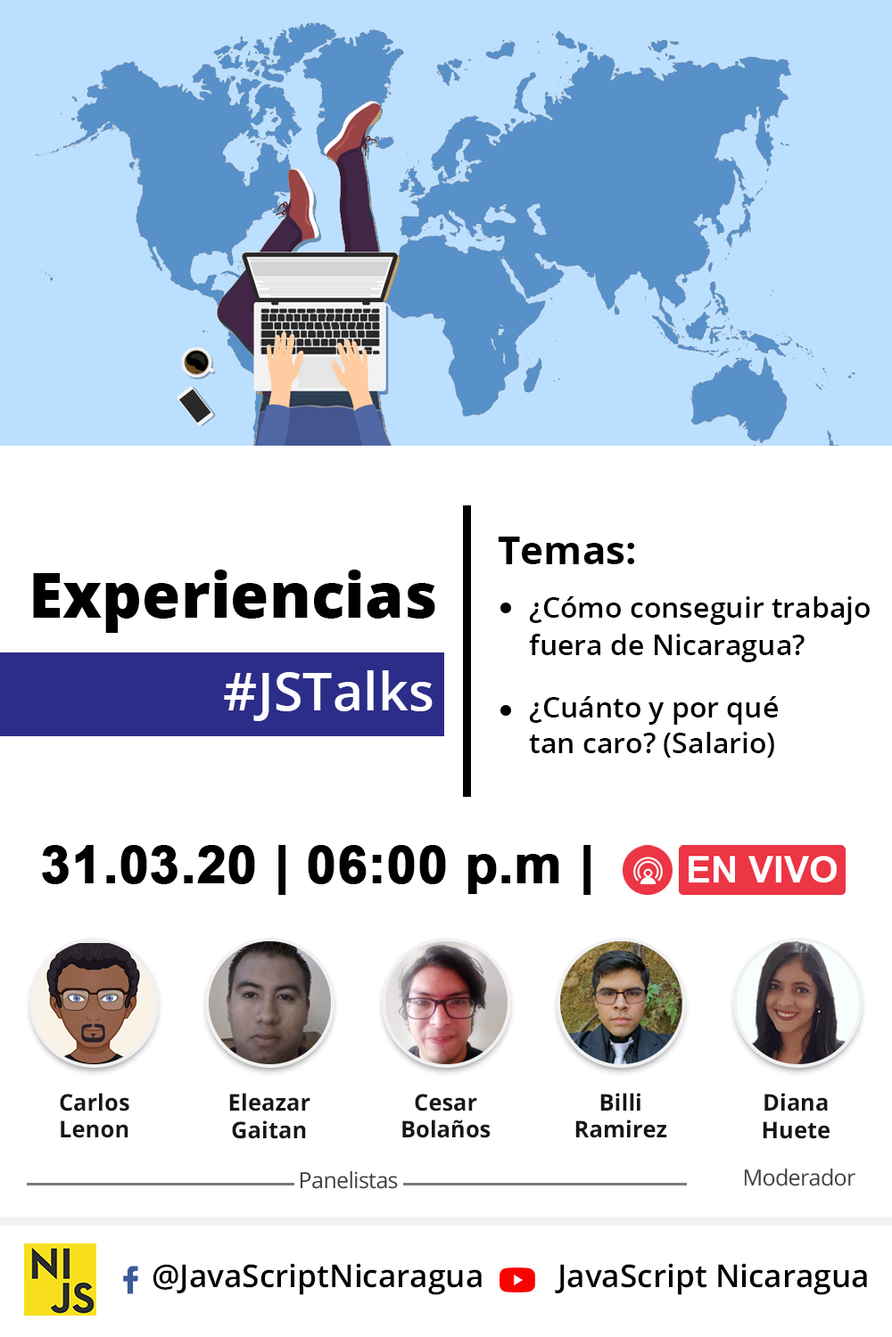
<style>
.page{position:relative;width:892px;height:1337px;background:#ffffff}
.page>*{position:absolute;margin:0}
.t1{font:39.2px "OpenSans-Bold";color:#000000}
.t2{font:62.4px "OpenSans-ExtraBold";color:#000000}
.t3{font:28.5px/37.4px "OpenSans-SemiBold";color:#000000}
.t4{font:28.5px/42.8px "OpenSans-SemiBold";color:#000000}
.t5{font:53px "OpenSans-SemiBold";color:#ffffff}
.t6{font:52.4px "Arial-BoldMT";color:#000000;font-weight:bold}
.t7{font:22.9px "OpenSans-Bold";color:#161616}
.t8{font:22.3px "OpenSans-Regular";letter-spacing:-0.025em;color:#404040}
.t9{font:31.4px "OpenSans-SemiBold";color:#000000}
</style>
<div class="page">
<p class="t1" style="left:498px;top:537px;width:136px;height:27px">Temas:</p>
<p class="t2" style="left:33px;top:570px;width:402px;height:63px">Experiencias</p>
<p class="t3" style="left:529px;top:596px;width:340px;height:162px">¿Cómo conseguir trabajo fuera de Nicaragua?<br><br><span class="t4">¿Cuánto y por qué<br>tan caro? (Salario)</span></p>
<p class="t5" style="left:224px;top:670px;width:208px;height:51px">#JSTalks</p>
<p class="t6" style="left:42px;top:845px;width:549px;height:50px">31.03.20 | 06:00 p.m |</p>
<p class="t7" style="left:60px;top:1093px;width:69px;height:46px;text-align:center">Carlos<br>Lenon</p>
<p class="t7" style="left:229px;top:1093px;width:81px;height:46px;text-align:center">Eleazar<br>Gaitan</p>
<p class="t7" style="left:402px;top:1094px;width:88px;height:45px;text-align:center">Cesar<br>Bolaños</p>
<p class="t7" style="left:575px;top:1093px;width:92px;height:46px;text-align:center">Billi<br>Ramirez</p>
<p class="t7" style="left:762px;top:1093px;width:67px;height:46px;text-align:center">Diana<br>Huete</p>
<p class="t8" style="left:744px;top:1168px;width:111px;height:19px">Moderador</p>
<p class="t8" style="left:300px;top:1171px;width:98px;height:18px">Panelistas</p>
<p class="t9" style="left:153px;top:1263px;width:714px;height:32px">@JavaScriptNicaragua         JavaScript Nicaragua</p>
</div>
